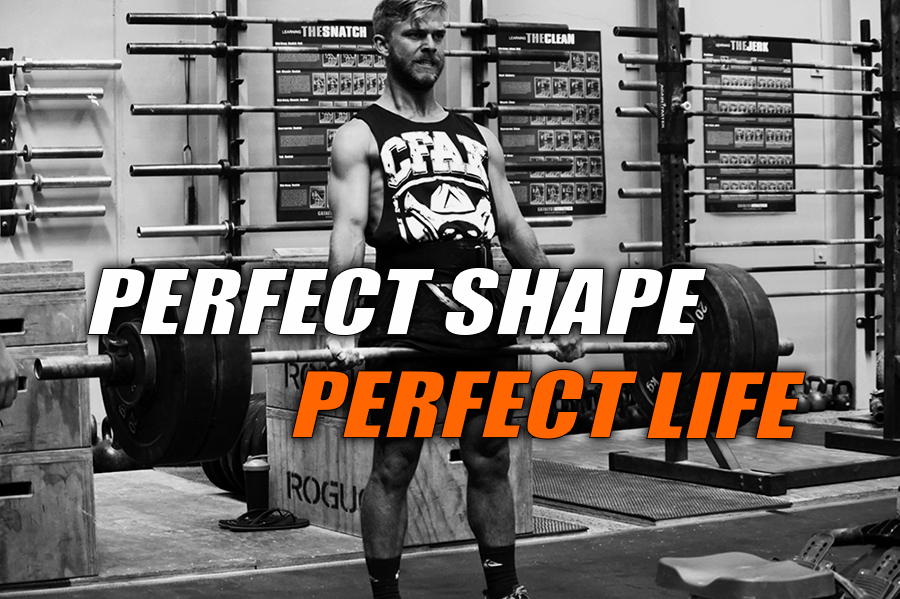
<style>
.page{position:relative;width:900px;height:599px}
.page>*{position:absolute;margin:0}
.t1{font:85.4px "Impact";color:#fefefe;font-style:italic;scale:1.2 1}
.t2{font:85.4px "Impact";color:#ff6500;font-style:italic;scale:1.2 1}
</style>
<div class="page">
<p class="t1" style="left:87px;top:267px;width:621px;height:69px">PERFECT SHAPE</p>
<p class="t2" style="left:291px;top:369px;width:516px;height:71px">PERFECT LIFE</p>
</div>
